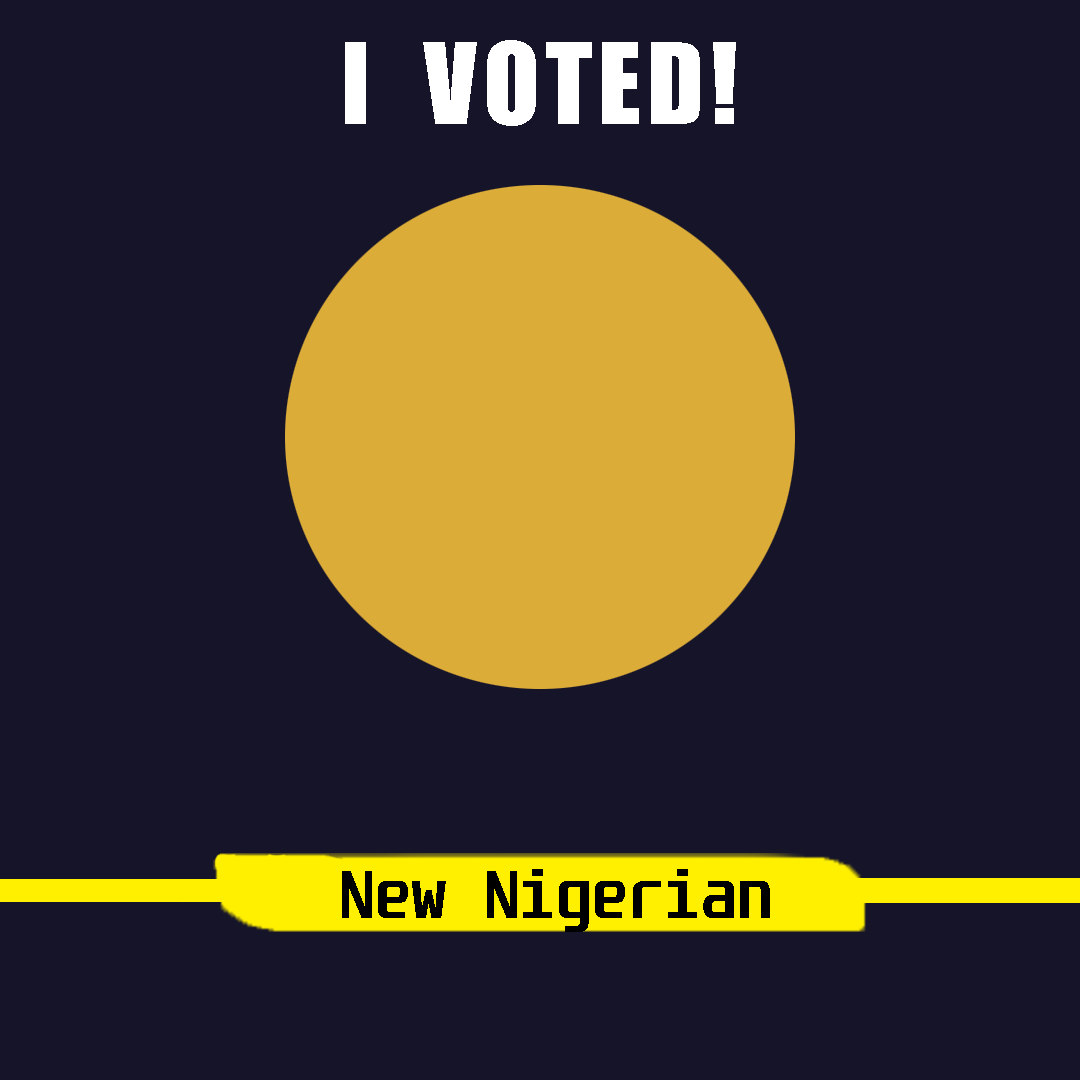
<style>
.page{position:relative;width:1080px;height:1080px;background:#161429}
.page>*{position:absolute;margin:0}
.t1{font:104.2px "Impact";letter-spacing:0.05em;color:#ffffff}
.t2{font:58.3px "Unispace-Bold";letter-spacing:0.01em;color:#000000}
</style>
<div class="page">
<p class="t1" style="left:345px;top:40px;width:391px;height:86px">I  VOTED!</p>
<p class="t2" style="left:342px;top:869px;width:428px;height:63px">New Nigerian</p>
</div>
